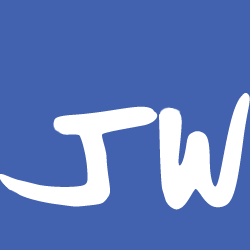
<style>
.page{position:relative;width:250px;height:250px;background:#4261af}
.page>*{position:absolute;margin:0}
.t1{font:210.5px "John_Walton_Print";letter-spacing:-0.01em;color:#ffffff}
</style>
<div class="page">
<p class="t1" style="left:2px;top:93px;width:248px;height:117px">JW</p>
<p class="t1" style="left:0px;top:106px;width:155px;height:98px">J</p>
</div>
